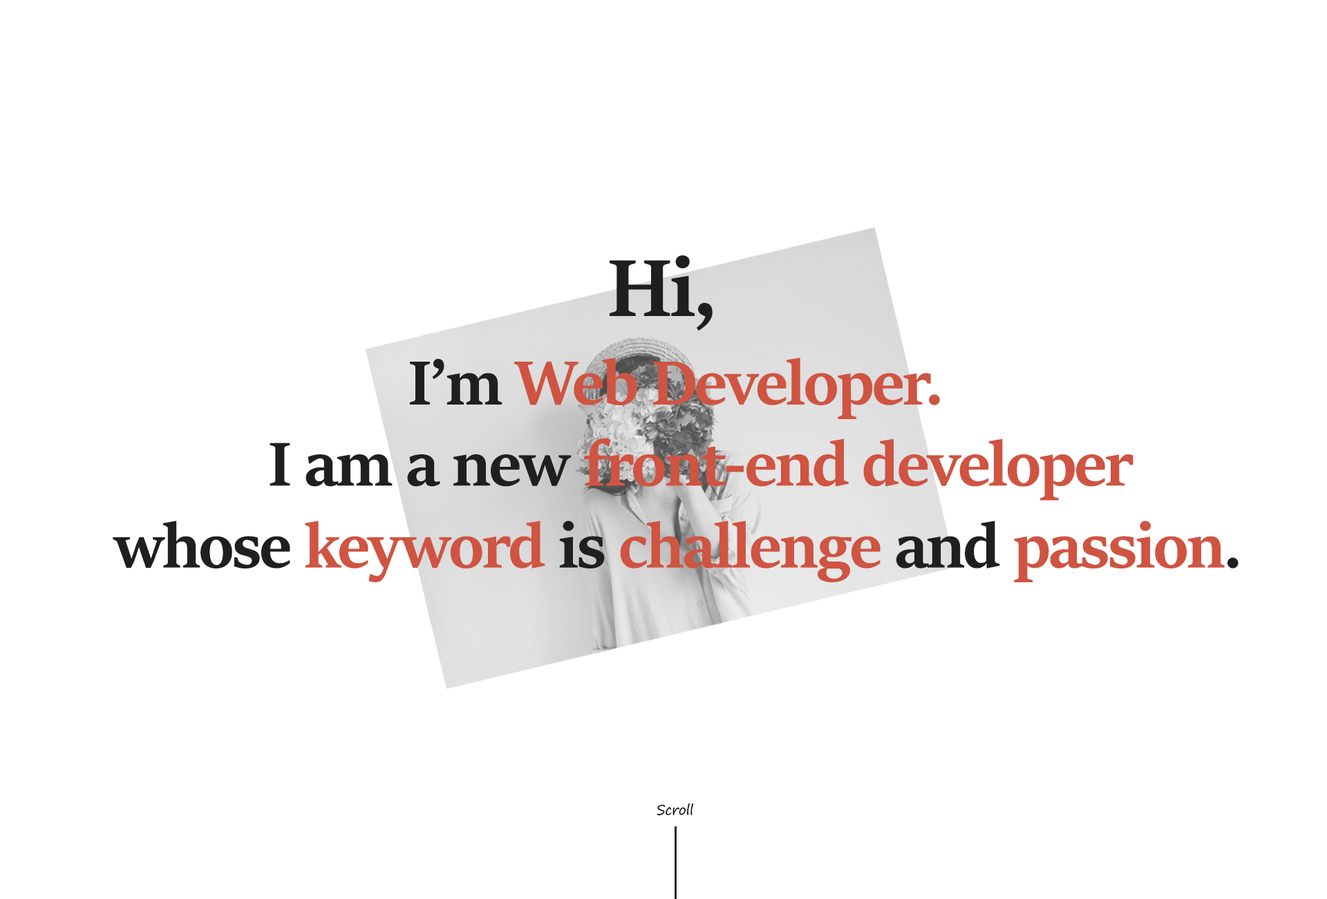
<style>
.page{position:relative;width:1327px;height:899px;background:#ffffff}
.page>*{position:absolute;margin:0}
.t1{font:89.9px "SitkaDisplay-Bold";letter-spacing:-0.025em;color:#1f1f1f}
.t2{font:69.1px "SitkaDisplay-Bold";letter-spacing:-0.025em;color:#cf5441}
.t3{font:69.1px "SitkaDisplay-Bold";letter-spacing:-0.025em;color:#1f1f1f}
.t4{font:13.8px "SegoePrint";letter-spacing:-0.025em;color:#1f1f1f}
</style>
<div class="page">
<p class="t1" style="left:610px;top:255px;width:103px;height:75px">Hi,</p>
<p class="t2" style="left:410px;top:357px;width:530px;height:62px"><span class="t3">I’m </span>Web Developer.</p>
<p class="t2" style="left:270px;top:438px;width:864px;height:62px"><span class="t3">I am a new </span>front-end developer</p>
<p class="t2" style="left:113px;top:520px;width:1126px;height:62px"><span class="t3">whose </span>keyword<span class="t3"> is </span>challenge<span class="t3"> and </span>passion<span class="t3">.</span></p>
<p class="t4" style="left:657px;top:802px;width:37px;height:13px">Scroll</p>
</div>
